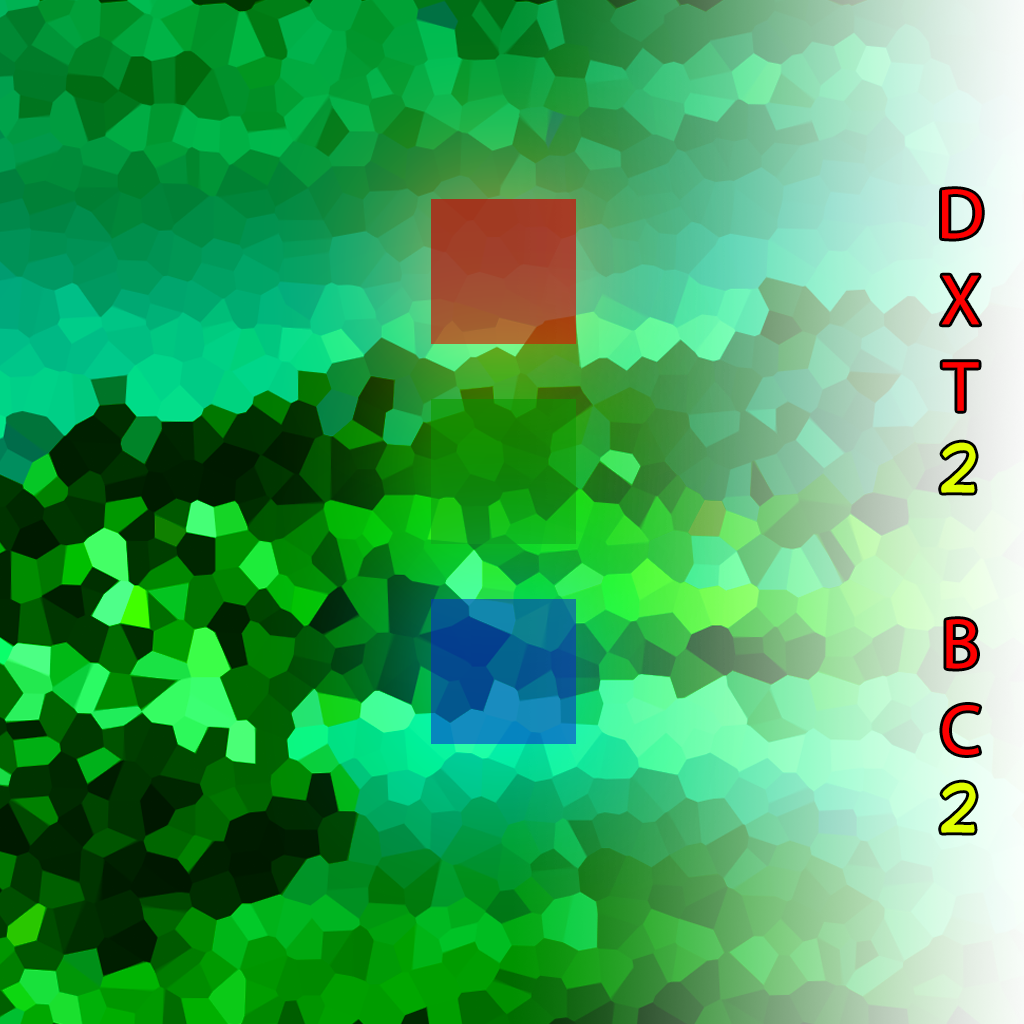
<style>
.page{position:relative;width:1024px;height:1024px}
.page>*{position:absolute;margin:0}
.t1{font:72px "MyriadPro-Regular";letter-spacing:0.1em;color:#fe0000}
.t2{font:72px "PlaytimeWithHotToddies";letter-spacing:0.1em;color:#e0fe00}
</style>
<div class="page">
<p class="t1" style="left:941px;top:189px;width:41px;height:222px;text-align:center">D<br>X<br>T</p>
<p class="t2" style="left:941px;top:442px;width:35px;height:51px">2</p>
<p class="t1" style="left:942px;top:619px;width:38px;height:136px;text-align:center">B<br>C</p>
<p class="t2" style="left:941px;top:782px;width:35px;height:51px">2</p>
</div>
